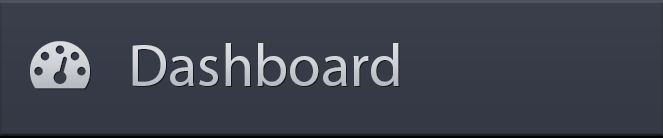
<style>
.page{position:relative;width:663px;height:138px}
.page>*{position:absolute;margin:0}
.t1{font:60px "MyriadPro-Regular";color:#c9d1e3}
</style>
<div class="page">
<p class="t1" style="left:132px;top:43px;width:267px;height:43px">Dashboard</p>
</div>
